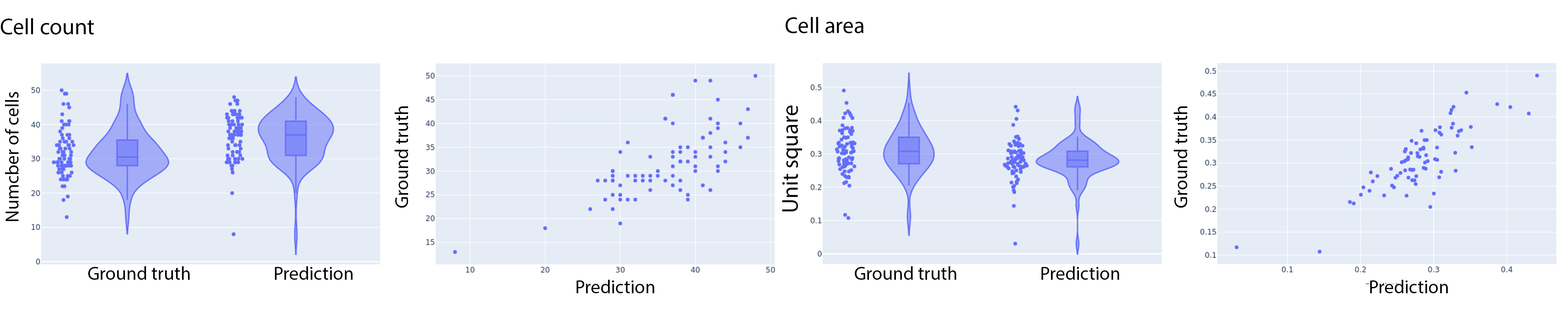
<style>
.page{position:relative;width:1568px;height:330px;background:#ffffff}
.page>*{position:absolute;margin:0}
.t1{font:22.6px "MyriadPro-Regular";color:#000000}
.t2{font:18.8px "MyriadPro-Regular";color:#000000}
</style>
<div class="page">
<p class="t1" style="left:785px;top:17px;width:79px;height:16px">Cell area</p>
<p class="t1" style="left:1px;top:18px;width:93px;height:17px">Cell count</p>
<p class="t2" style="left:5px;top:92px;width:14px;height:129px;rotate:-90deg">Numcber of cells</p>
<p class="t2" style="left:395px;top:106px;width:13px;height:102px;rotate:-90deg">Ground truth</p>
<p class="t1" style="left:782px;top:105px;width:20px;height:107px;rotate:-90deg">Unit square</p>
<p class="t2" style="left:1174px;top:106px;width:13px;height:102px;rotate:-90deg">Ground truth</p>
<p class="t2" style="left:88px;top:266px;width:102px;height:14px">Ground truth</p>
<p class="t2" style="left:275px;top:266px;width:78px;height:14px">Prediction</p>
<p class="t2" style="left:855px;top:266px;width:101px;height:14px">Ground truth</p>
<p class="t2" style="left:1041px;top:266px;width:78px;height:14px">Prediction</p>
<p class="t2" style="left:576px;top:280px;width:78px;height:13px">Prediction</p>
<p class="t2" style="left:1370px;top:280px;width:78px;height:13px">Prediction</p>
</div>
